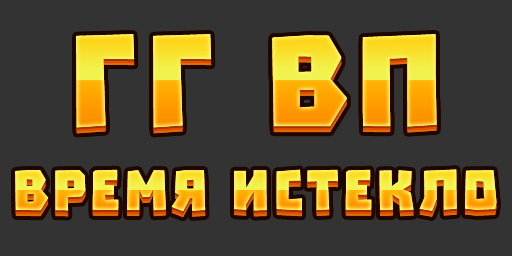
<style>
.page{position:relative;width:512px;height:256px;background:#333333}
.page>*{position:absolute;margin:0}
.t1{font:145.3px "Troika";letter-spacing:0.06em}
.t2{font:64px "Troika";letter-spacing:0.06em}
</style>
<div class="page">
<p class="t1" style="left:76px;top:34px;width:361px;height:94px">ГГ ВП</p>
<p class="t2" style="left:15px;top:169px;width:482px;height:43px">время истекло</p>
</div>
